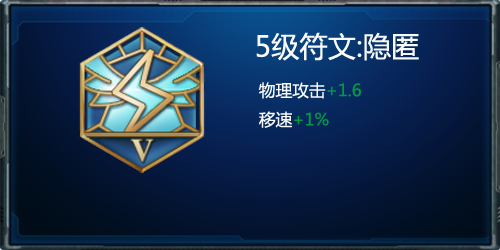
<style>
.page{position:relative;width:500px;height:250px}
.page>*{position:absolute;margin:0}
.t1{font:28.3px "MicrosoftYaHei";color:#f7faf8}
.t2{font:16.7px "MicrosoftYaHei";color:#f7faf8}
.t3{font:16.7px "MicrosoftYaHei";color:#009944}
</style>
<div class="page">
<p class="t1" style="left:256px;top:32px;width:163px;height:96px;text-align:center">5级符文:隐匿<br><span class="t2">  物理攻击</span><span class="t3">+1.6<br></span><span class="t2">  移速</span><span class="t3">+1%</span></p>
</div>
